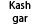
<style>
.page{position:relative;width:40px;height:25px;background:#ffffff}
.page>*{position:absolute;margin:0}
.t1{font:11px "MyriadPro-Regular";color:#000000}
</style>
<div class="page">
<p class="t1" style="left:9px;top:1px;width:22px;height:23px;text-align:center">Kash<br>gar</p>
</div>
